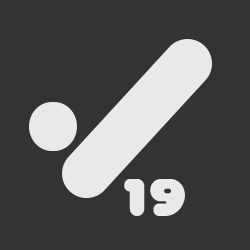
<style>
.page{position:relative;width:250px;height:250px;background:#333333}
.page>*{position:absolute;margin:0}
.t1{font:53px "YeyeyRegular";letter-spacing:0.06em;color:#e8e9eb;scale:0.94 1}
</style>
<div class="page">
<p class="t1" style="left:124px;top:179px;width:61px;height:37px">19</p>
</div>
